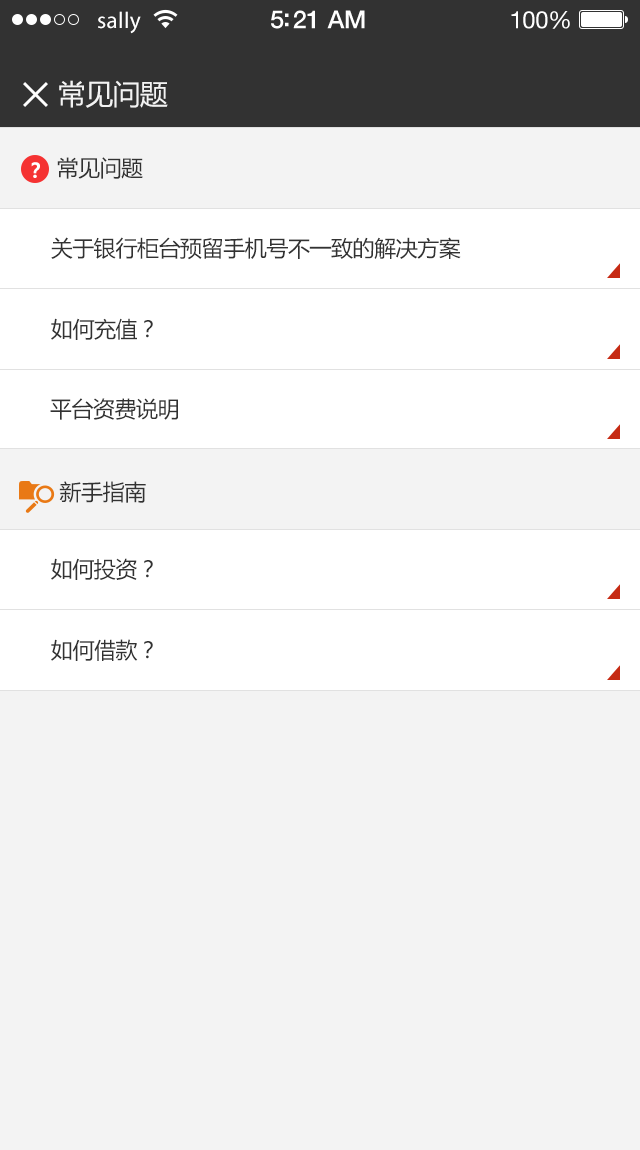
<style>
.page{position:relative;width:640px;height:1150px;background:#f3f3f3}
.page>*{position:absolute;margin:0}
.t1{font:23px "MyriadPro-Regular";letter-spacing:0.02em;color:#ffffff}
.t2{font:25px "HelveticaNeue-Medium";letter-spacing:-0.02em;color:#ffffff}
.t3{font:24px "HelveticaNeue";letter-spacing:-0.02em;color:#ffffff}
.t4{font:28px "MicrosoftYaHei";letter-spacing:-0.02em;color:#f3f3f3}
.t5{font:22px "MicrosoftYaHei";letter-spacing:-0.02em;color:#323232}
.t6{font:20px "MicrosoftYaHei-Bold";color:#ffffff}
</style>
<div class="page">
<p class="t1" style="left:98px;top:11px;width:43px;height:23px">sally</p>
<p class="t2" style="left:271px;top:10px;width:94px;height:19px">5:21 AM</p>
<p class="t3" style="left:511px;top:11px;width:59px;height:18px">100%</p>
<p class="t4" style="left:59px;top:80px;width:109px;height:28px">常见问题</p>
<p class="t5" style="left:57px;top:157px;width:86px;height:22px">常见问题</p>
<p class="t6" style="left:31px;top:162px;width:9px;height:16px">？</p>
<p class="t5" style="left:51px;top:237px;width:410px;height:23px">关于银行柜台预留手机号不一致的解决方案</p>
<p class="t5" style="left:51px;top:318px;width:102px;height:22px">如何充值？</p>
<p class="t5" style="left:50px;top:398px;width:128px;height:22px">平台资费说明</p>
<p class="t5" style="left:59px;top:481px;width:87px;height:22px">新手指南</p>
<p class="t5" style="left:51px;top:558px;width:102px;height:22px">如何投资？</p>
<p class="t5" style="left:51px;top:639px;width:102px;height:22px">如何借款？</p>
</div>
